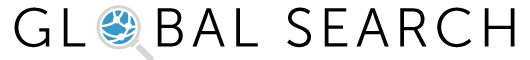
<style>
.page{position:relative;width:530px;height:60px;background:#ffffff}
.page>*{position:absolute;margin:0}
.t1{font:54.4px "MuseoSans-300";letter-spacing:0.1em;color:#000000;text-transform:uppercase}
</style>
<div class="page">
<p class="t1" style="left:14px;top:7px;width:501px;height:41px">Gl   bal Search</p>
</div>
